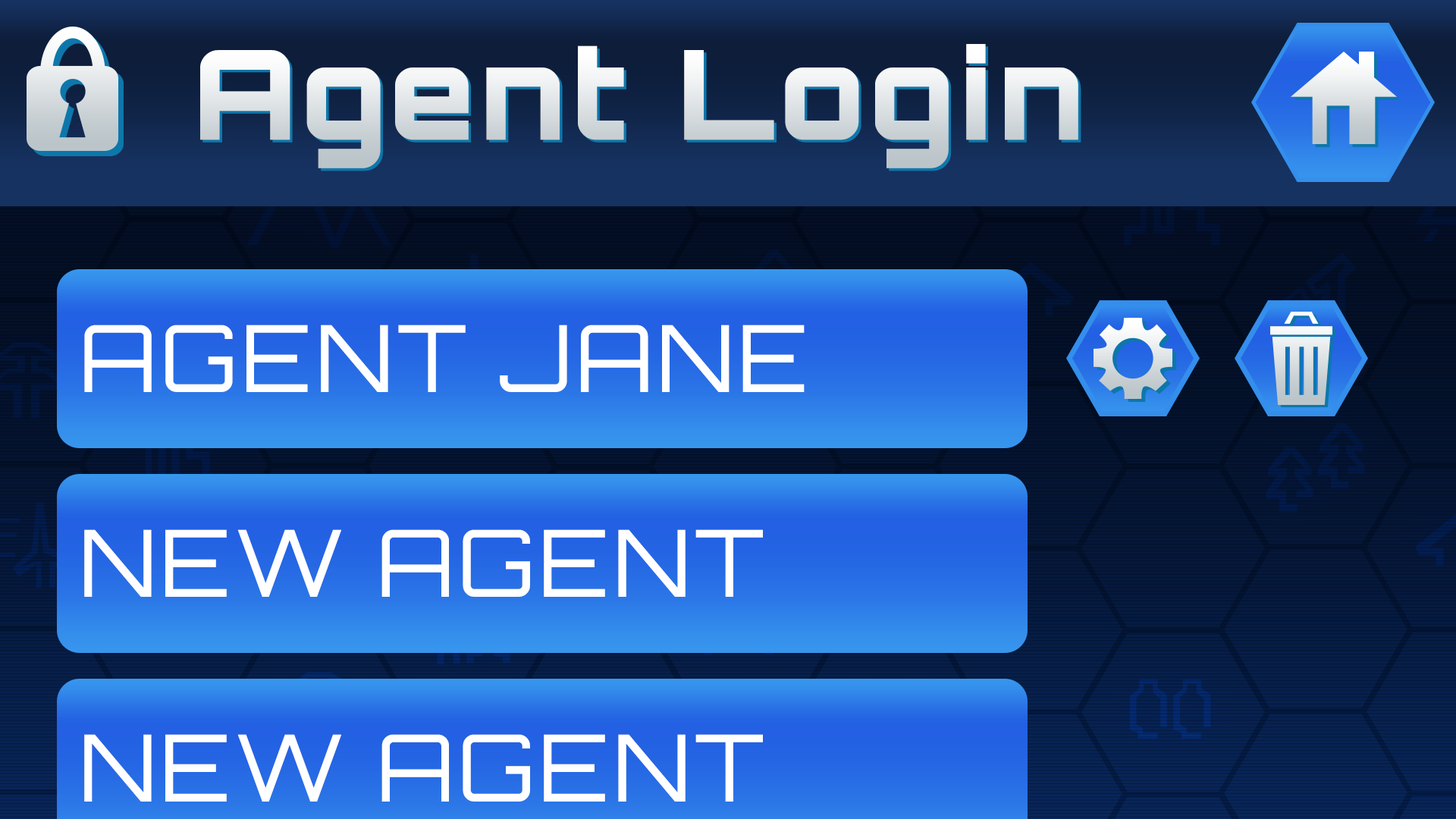
<style>
.page{position:relative;width:1456px;height:819px}
.page>*{position:absolute;margin:0}
.t1{font:124.1px "Orbitron-Black";letter-spacing:0.04em}
.t2{font:92.7px "Orbitron-Regular";letter-spacing:0.04em;color:#ffffff}
</style>
<div class="page">
<p class="t1" style="left:200px;top:44px;width:878px;height:124px">Agent Login</p>
<p class="t1" style="left:202px;top:46px;width:879px;height:125px">Agent Login</p>
<p class="t2" style="left:84px;top:325px;width:721px;height:67px">AGENT JANE</p>
<p class="t2" style="left:84px;top:529px;width:679px;height:68px">NEW AGENT</p>
<p class="t2" style="left:84px;top:734px;width:679px;height:68px">NEW AGENT</p>
</div>
